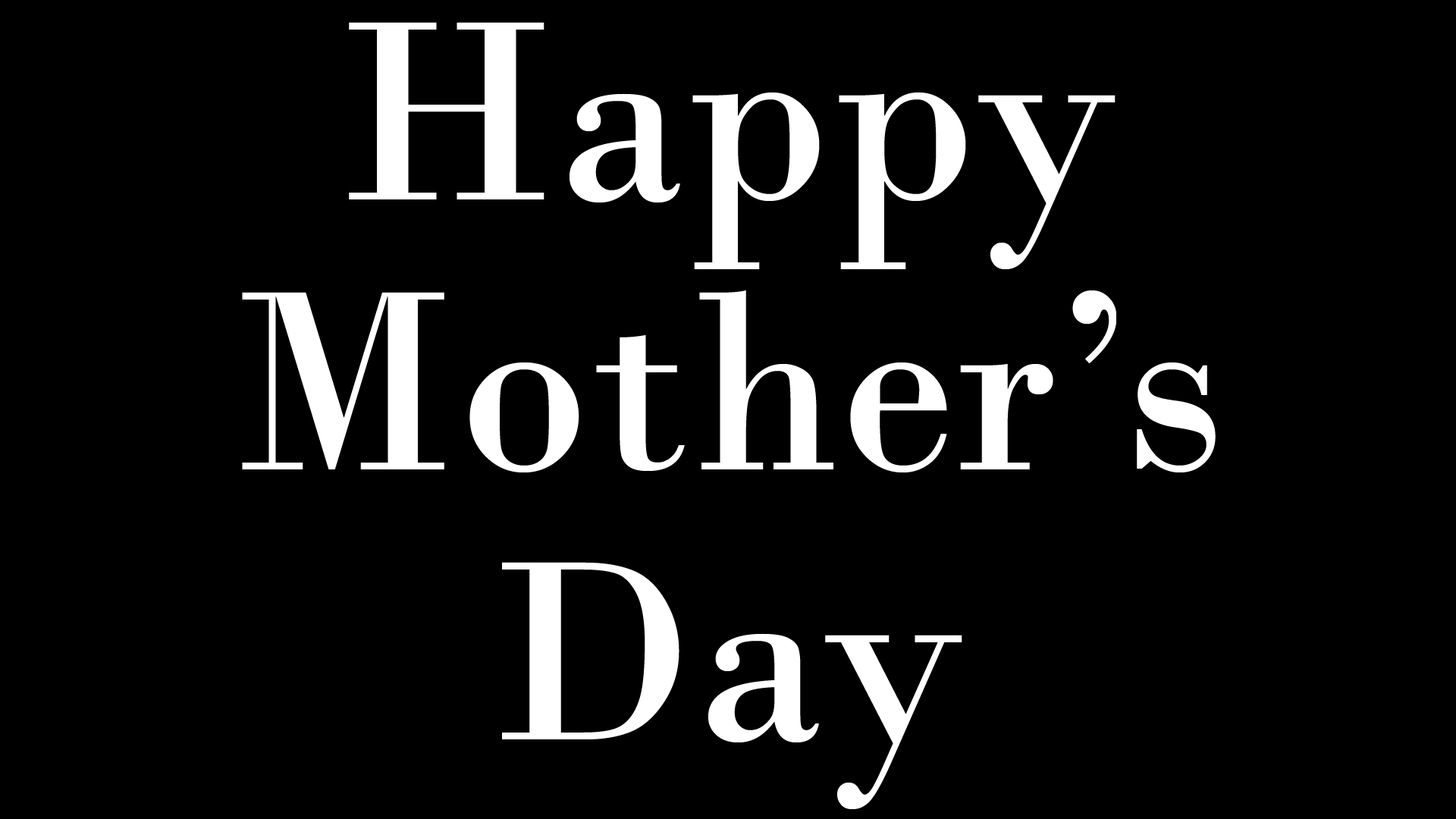
<style>
.page{position:relative;width:1456px;height:819px;background:#000000}
.page>*{position:absolute;margin:0}
.t1{font:270px/270px "BodoniMT";color:#ffffff}
</style>
<div class="page">
<p class="t1" style="left:242px;top:22px;width:974px;height:787px;text-align:center">Happy<br>Mother’s<br>Day</p>
</div>
